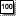
<style>
.page{position:relative;width:16px;height:16px;background:#ffffff}
.page>*{position:absolute;margin:0}
.t1{font:7px "ArialMT";color:#000000}
</style>
<div class="page">
<p class="t1" style="left:1px;top:3px;width:12px;height:7px">100</p>
</div>
